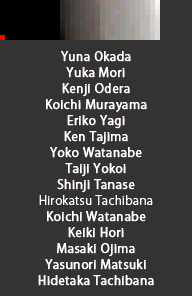
<style>
.page{position:relative;width:192px;height:296px;background:#333333}
.page>*{position:absolute;margin:0}
.t1{font:12px/16px "KozGoPr6N-Regular";letter-spacing:0.025em;color:#ffffff;font-weight:bold}
.t2{font:12px/16px "KozGoPr6N-Regular";letter-spacing:0.025em;color:#ffffff}
</style>
<div class="page">
<p class="t1" style="left:38px;top:51px;width:116px;height:235px;text-align:center">Yuna Okada<br>Yuka Mori<br>Kenji Odera<br>Koichi Murayama<br>Eriko Yagi<br>Ken Tajima<br>Yoko Watanabe<br>Taiji Yokoi<br>Shinji Tanase<br><span class="t2">Hirokatsu Tachibana<br></span>Koichi Watanabe<br>Keiki Hori<br>Masaki Ojima<br>Yasunori Matsuki<br>Hidetaka Tachibana</p>
</div>
